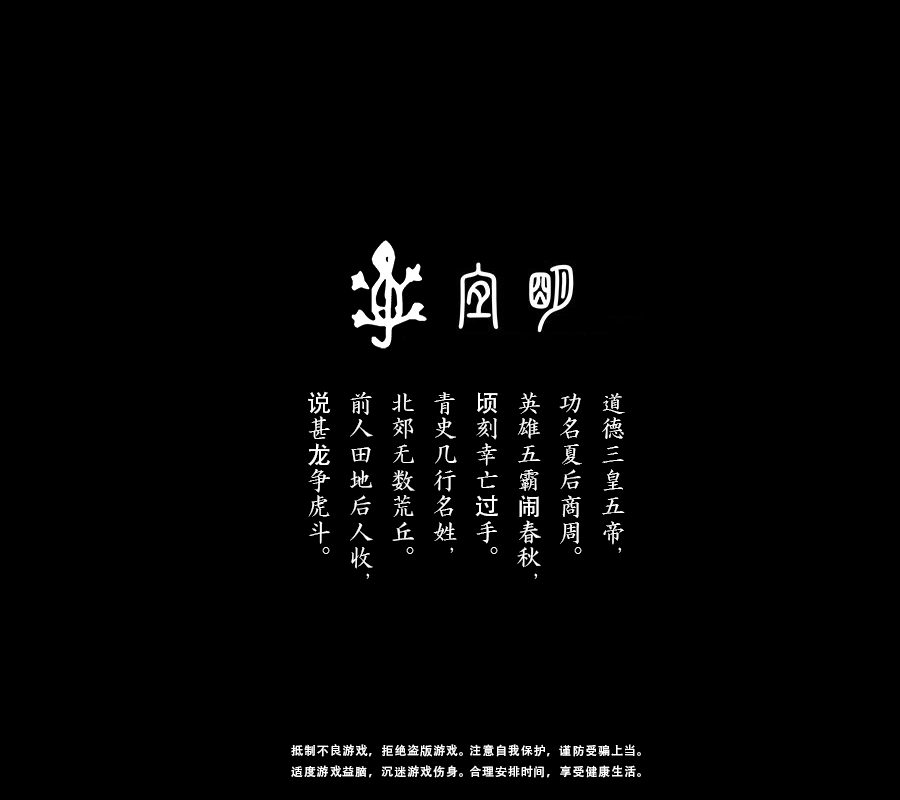
<style>
.page{position:relative;width:900px;height:800px;background:#000000}
.page>*{position:absolute;margin:0}
.t1{font:24px "ShinshuSeitenKaisho";letter-spacing:0.075em;color:#ffffff}
.t2{font:24px "AdobeHeitiStd-Regular";letter-spacing:0.075em;color:#ffffff}
.t3{font:12px "AdobeHeitiStd-Regular";letter-spacing:0.075em;color:#ffffff}
</style>
<div class="page">
<p class="t1" style="left:308px;top:391px;width:317px;height:188px">道德三皇五帝，<br>功名夏后商周。<br>英雄五霸<span class="t2">闹</span>春秋，<br><span class="t2">顷</span>刻幸亡<span class="t2">过</span>手。<br>青史几行名姓，<br>北郊无数荒丘。<br>前人田地后人收，<br><span class="t2">说</span>甚<span class="t2">龙</span>争虎斗。</p>
<p class="t3" style="left:291px;top:744px;width:350px;height:34px">抵制不良游戏，拒绝盗版游戏。 注意自我保护，谨防受骗上当。 <br>适度游戏益脑，沉迷游戏伤身。 合理安排时间，享受健康生活。</p>
</div>
